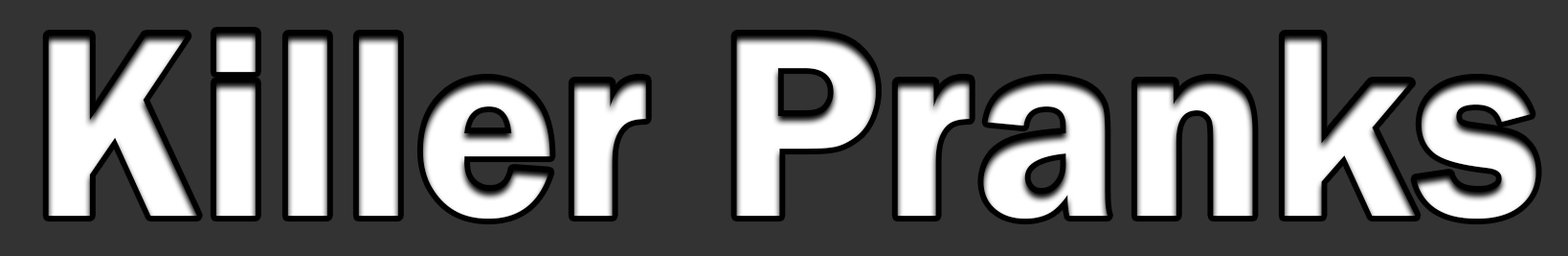
<style>
.page{position:relative;width:1568px;height:256px;background:#333333}
.page>*{position:absolute;margin:0}
.t1{font:269.5px "FranklinGothic-Demi";color:#ffffff}
</style>
<div class="page">
<p class="t1" style="left:48px;top:33px;width:1488px;height:185px">Killer Pranks</p>
</div>
